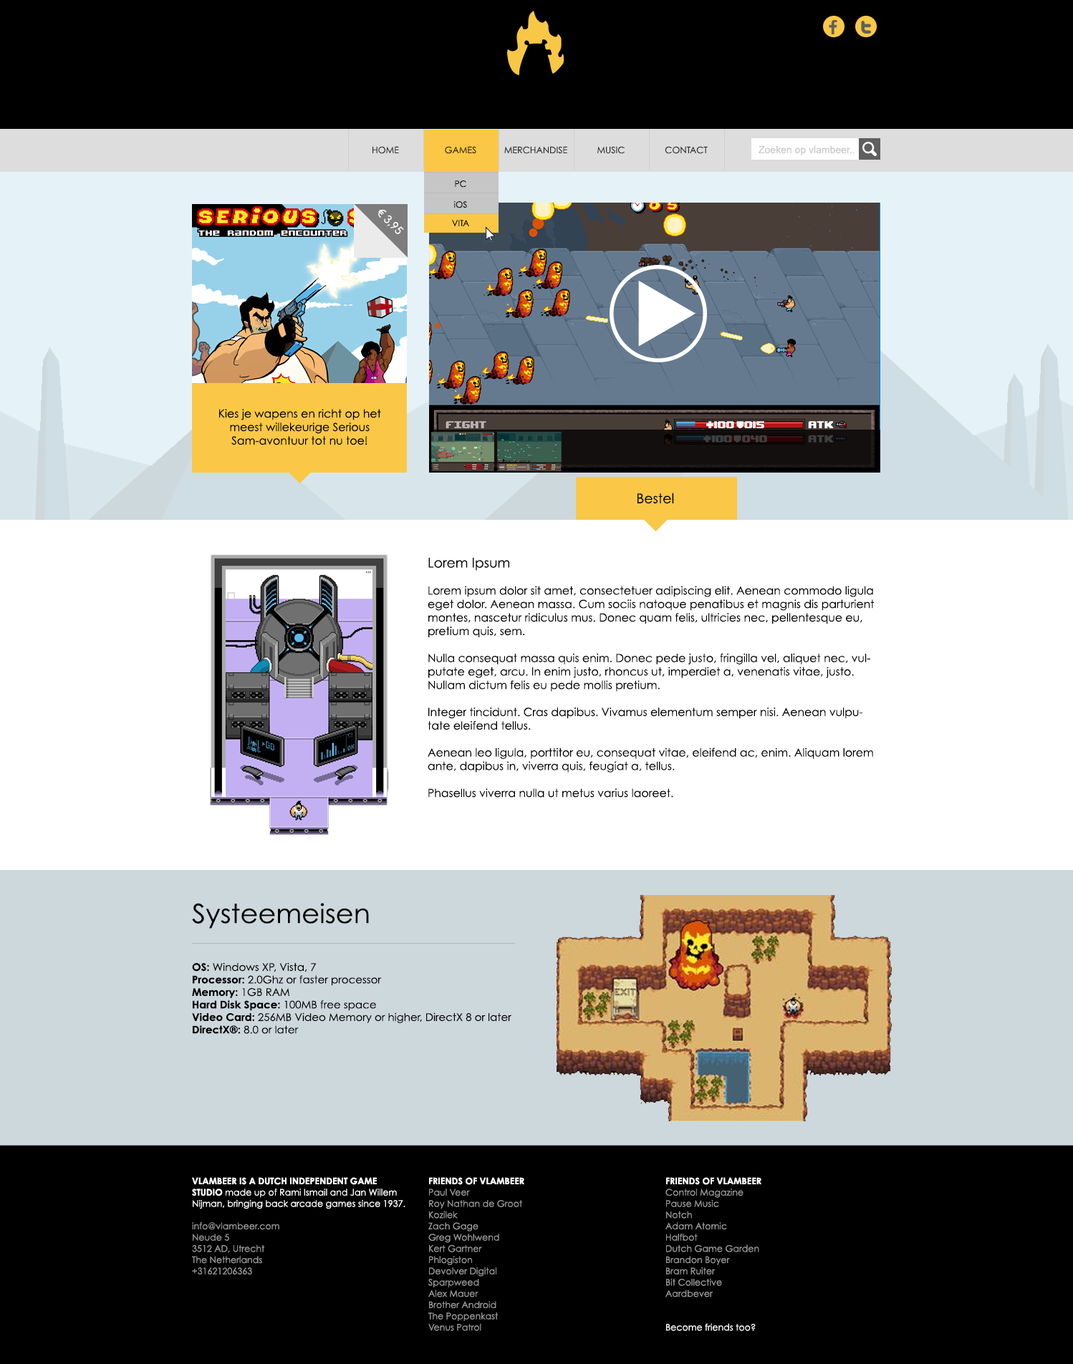
<style>
.page{position:relative;width:1073px;height:1364px;background:#000000}
.page>*{position:absolute;margin:0}
.t1{font:9px "CenturyGothic";color:#2c2c2c}
.t2{font:9px "CenturyGothic";color:#332707}
.t3{font:10px "ArialMT";color:#cccccc}
.t4{font:8.6px "CenturyGothic";color:#000000}
.t5{font:11.2px "CenturyGothic";color:#ffffff}
.t6{font:11.2px/13.5px "CenturyGothic";color:#000000}
.t7{font:13.5px/15.7px "CenturyGothic";color:#000000}
.t8{font:13.5px "CenturyGothic";color:#000000}
.t9{font:13.5px/13.5px "CenturyGothic";color:#000000}
.t10{font:26.6px "CenturyGothic";color:#000000;scale:1.03 1}
.t11{font:10.4px/12.5px "CenturyGothic";color:#000000}
.t12{font:10.4px/12.5px "CenturyGothic-Bold";color:#000000}
.t13{font:9px/11.2px "CenturyGothic";color:#ffffff}
.t14{font:9px/11.2px "CenturyGothic-Bold";color:#ffffff}
.t15{font:9px/11.2px "CenturyGothic";color:#999999}
</style>
<div class="page">
<p class="t1" style="left:372px;top:146px;width:27px;height:8px">HOME</p>
<p class="t2" style="left:445px;top:146px;width:31px;height:8px">GAMES</p>
<p class="t1" style="left:504px;top:146px;width:63px;height:8px">MERCHANDISE</p>
<p class="t1" style="left:597px;top:146px;width:27px;height:8px">MUSIC</p>
<p class="t1" style="left:665px;top:146px;width:43px;height:8px">CONTACT</p>
<p class="t3" style="left:758px;top:145px;width:96px;height:10px">Zoeken op vlambeer..</p>
<p class="t4" style="left:455px;top:180px;width:11px;height:8px">PC</p>
<p class="t5" style="left:378px;top:209px;width:26px;height:25px;rotate:45deg">€ 3,95</p>
<p class="t4" style="left:454px;top:201px;width:13px;height:7px">iOS</p>
<p class="t4" style="left:452px;top:220px;width:17px;height:6px">VITA</p>
<p class="t6" style="left:219px;top:409px;width:162px;height:36px;text-align:center"><span class="t7"><br></span>Kies je wapens en richt op het meest willekeurige Serious Sam-avontuur tot nu toe!</p>
<p class="t8" style="left:637px;top:493px;width:37px;height:11px">Bestel</p>
<p class="t6" style="left:428px;top:558px;width:446px;height:240px"><span class="t9">Lorem Ipsum<br></span><br>Lorem ipsum dolor sit amet, consectetuer adipiscing elit. Aenean commodo ligula eget dolor. Aenean massa. Cum sociis natoque penatibus et magnis dis parturient montes, nascetur ridiculus mus. Donec quam felis, ultricies nec, pellentesque eu, pretium quis, sem. <br><br>Nulla consequat massa quis enim. Donec pede justo, fringilla vel, aliquet nec, vulputate eget, arcu. In enim justo, rhoncus ut, imperdiet a, venenatis vitae, justo. Nullam dictum felis eu pede mollis pretium. <br><br>Integer tincidunt. Cras dapibus. Vivamus elementum semper nisi. Aenean vulputate eleifend tellus. <br><br>Aenean leo ligula, porttitor eu, consequat vitae, eleifend ac, enim. Aliquam lorem ante, dapibus in, viverra quis, feugiat a, tellus. <br><br>Phasellus viverra nulla ut metus varius laoreet.</p>
<p class="t10" style="left:192px;top:903px;width:177px;height:26px">Systeemeisen</p>
<p class="t11" style="left:192px;top:962px;width:319px;height:72px;text-align:justify"><span class="t12">OS:</span> Windows XP, Vista, 7<br><span class="t12">Processor:</span> 2.0Ghz or faster processor<br><span class="t12">Memory:</span> 1GB RAM<br><span class="t12">Hard Disk Space:</span> 100MB free space<br><span class="t12">Video Card:</span> 256MB Video Memory or higher, DirectX 8 or later<br><span class="t12">DirectX®:</span> 8.0 or later</p>
<p class="t13" style="left:192px;top:1177px;width:213px;height:98px"><span class="t14">VLAMBEER IS A DUTCH INDEPENDENT GAME STUDIO</span> made up of Rami Ismail and Jan Willem Nijman, bringing back arcade games since 1937.<br><br><span class="t15">info@vlambeer.com <br>Neude 5<br>3512 AD, Utrecht<br>The Netherlands<br>+31621206363</span></p>
<p class="t15" style="left:428px;top:1177px;width:96px;height:154px"><span class="t14">FRIENDS OF VLAMBEER<br></span>Paul Veer<br>Roy Nathan de Groot<br>Kozilek<br>Zach Gage<br>Greg Wohlwend<br>Kert Gartner<br>Phlogiston<br>Devolver Digital<br>Sparpweed<br>Alex Mauer<br>Brother Android<br>The Poppenkast<br>Venus Patrol</p>
<p class="t15" style="left:665px;top:1177px;width:96px;height:154px"><span class="t14">FRIENDS OF VLAMBEER<br></span>Control Magazine<br>Pause Music<br>Notch<br>Adam Atomic<br>Halfbot<br>Dutch Game Garden<br>Brandon Boyer<br>Bram Ruiter<br>Bit Collective<br>Aardbever<br><br><br><span class="t13">Become friends too?</span></p>
</div>
